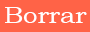
<style>
.page{position:relative;width:90px;height:32px;background:#ff6347}
.page>*{position:absolute;margin:0}
.t1{font:24px "BookmanOldStyle";color:#ffffff;scale:1.07 1}
</style>
<div class="page">
<p class="t1" style="left:5px;top:7px;width:82px;height:16px">Borrar</p>
</div>
